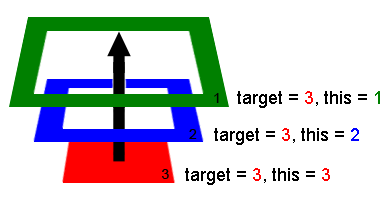
<style>
.page{position:relative;width:392px;height:202px;background:#ffffff}
.page>*{position:absolute;margin:0}
.t1{font:18px "ArialMT";color:#000000}
.t2{font:18px "ArialMT";color:#ff0202}
.t3{font:18px "ArialMT";color:#008000}
.t4{font:18px "ArialMT";color:#0000ff}
</style>
<div class="page">
<p class="t1" style="left:237px;top:91px;width:143px;height:17px">target = <span class="t2">3</span>, this = <span class="t3">1</span></p>
<p class="t1" style="left:214px;top:128px;width:145px;height:17px">target = <span class="t2">3</span>, this = <span class="t4">2</span></p>
<p class="t1" style="left:185px;top:168px;width:145px;height:17px">target = <span class="t2">3</span>, this = <span class="t2">3</span></p>
</div>
